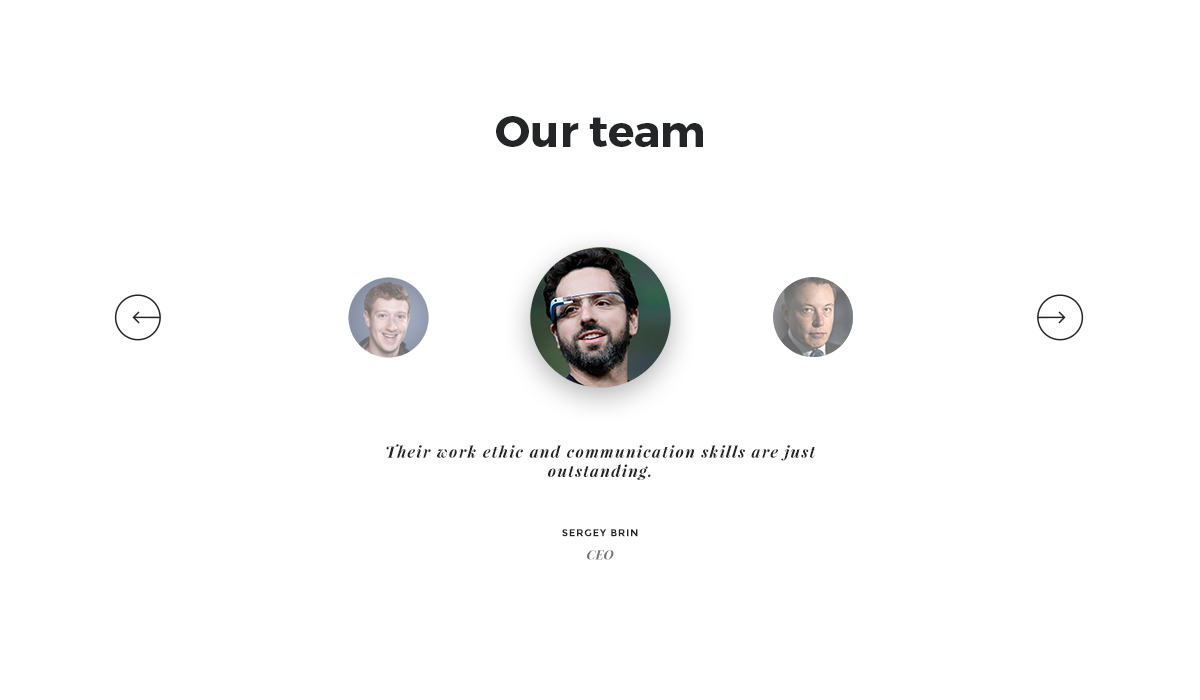
<style>
.page{position:relative;width:1200px;height:700px;background:#ffffff}
.page>*{position:absolute;margin:0}
.t1{font:44px "Montserrat-Bold";color:#242526}
.t2{font:16px "PlayfairDisplay-BoldItalic";letter-spacing:0.08em;color:#242526}
.t3{font:10px "Montserrat-Bold";letter-spacing:0.08em;color:#242526;text-transform:uppercase}
.t4{font:13px "PlayfairDisplay-BoldItalic";color:#747474}
</style>
<div class="page">
<p class="t1" style="left:496px;top:116px;width:207px;height:31px">Our team</p>
<p class="t2" style="left:386px;top:444px;width:430px;height:36px;text-align:center">Their work ethic and communication skills are just outstanding.</p>
<p class="t3" style="left:562px;top:529px;width:76px;height:8px">sergey brin</p>
<p class="t4" style="left:587px;top:550px;width:27px;height:10px">CEO</p>
</div>
